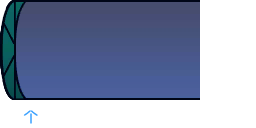
<style>
.page{position:relative;width:256px;height:128px;background:#ffffff}
.page>*{position:absolute;margin:0}
.t1{font:14.7px "FZY3--GB1-4";letter-spacing:0.08em;color:#3ba1ff}
</style>
<div class="page">
<p class="t1" style="left:23px;top:110px;width:15px;height:14px">个</p>
</div>
